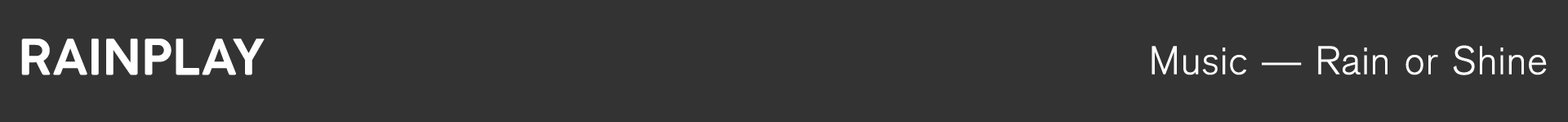
<style>
.page{position:relative;width:1568px;height:122px;background:#333333}
.page>*{position:absolute;margin:0}
.t1{font:48.3px "COCOGOOSE-DemiBold";color:#ffffff}
.t2{font:39.2px "AkzidenzGrotesk-Light";letter-spacing:0.05em;color:#ffffff}
</style>
<div class="page">
<p class="t1" style="left:21px;top:38px;width:244px;height:37px">RAINPLAY</p>
<p class="t2" style="left:1152px;top:45px;width:395px;height:30px">Music — Rain or Shine</p>
</div>
